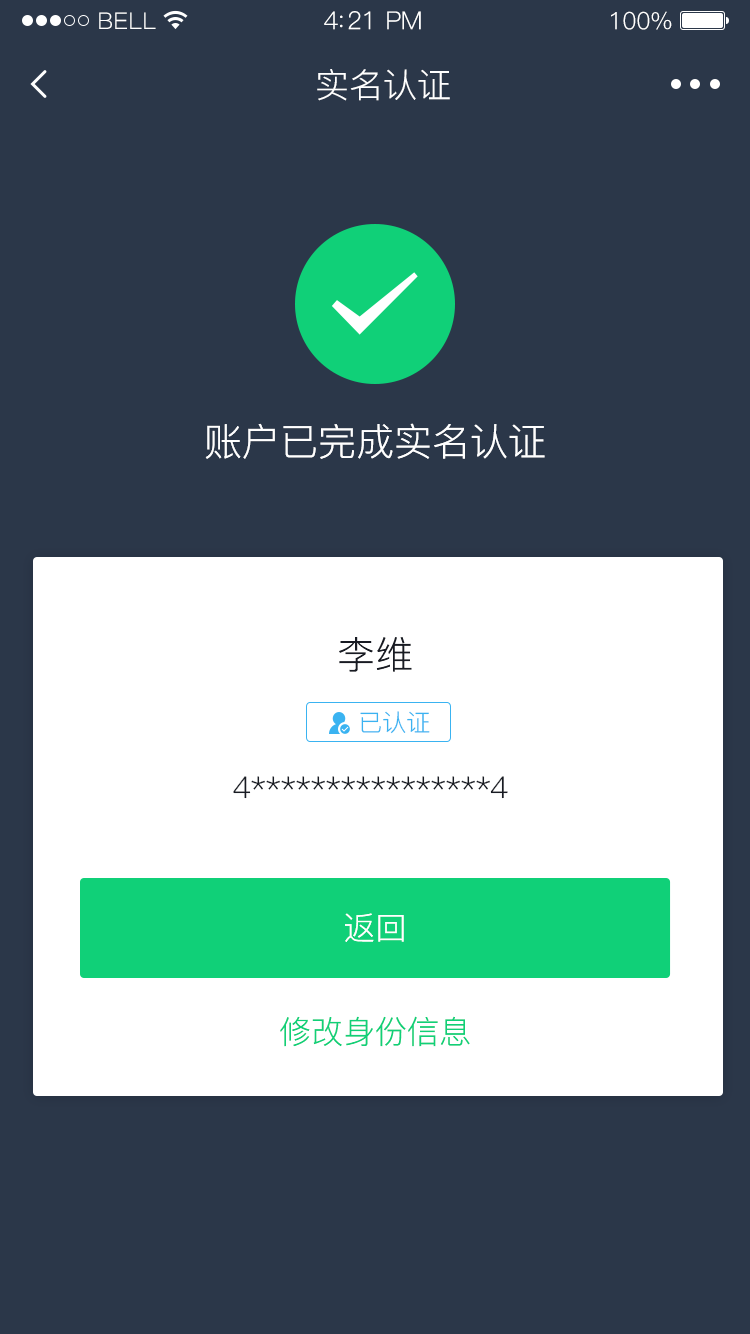
<style>
.page{position:relative;width:750px;height:1334px;background:#2b3749}
.page>*{position:absolute;margin:0}
.t1{font:23px "PingFang-SC-Regular";letter-spacing:0.02em;color:#ffffff}
.t2{font:25px "PingFang-SC-Regular";letter-spacing:-0.02em;color:#ffffff}
.t3{font:24px "PingFang-SC-Regular";letter-spacing:-0.02em;color:#ffffff}
.t4{font:34px "PingFang-SC-Regular";color:#ffffff}
.t5{font:38px "PingFang-SC-Regular";color:#ffffff}
.t6{font:38px "PingFang-SC-Regular";color:#181b23}
.t7{font:24px "PingFang-SC-Regular";color:#3ab3f1}
.t8{font:30px "PingFang-SC-Regular";color:#181b23}
.t9{font:32px "PingFang-SC-Regular";color:#ffffff}
.t10{font:32px "PingFang-SC-Regular";color:#10d078}
</style>
<div class="page">
<p class="t1" style="left:99px;top:12px;width:57px;height:17px">BELL</p>
<p class="t1" style="left:99px;top:12px;width:57px;height:17px">BELL</p>
<p class="t2" style="left:324px;top:11px;width:97px;height:19px">4:21 PM</p>
<p class="t2" style="left:324px;top:11px;width:97px;height:19px">4:21 PM</p>
<p class="t3" style="left:611px;top:11px;width:61px;height:19px">100%</p>
<p class="t3" style="left:611px;top:11px;width:61px;height:19px">100%</p>
<p class="t4" style="left:317px;top:69px;width:133px;height:32px">实名认证</p>
<p class="t5" style="left:205px;top:423px;width:340px;height:36px">账户已完成实名认证</p>
<p class="t6" style="left:339px;top:637px;width:73px;height:35px">李维</p>
<p class="t7" style="left:360px;top:711px;width:70px;height:23px">已认证</p>
<p class="t8" style="left:233px;top:776px;width:275px;height:23px">4****************4</p>
<p class="t9" style="left:345px;top:913px;width:59px;height:29px">返回</p>
<p class="t10" style="left:280px;top:1016px;width:190px;height:31px">修改身份信息</p>
</div>
